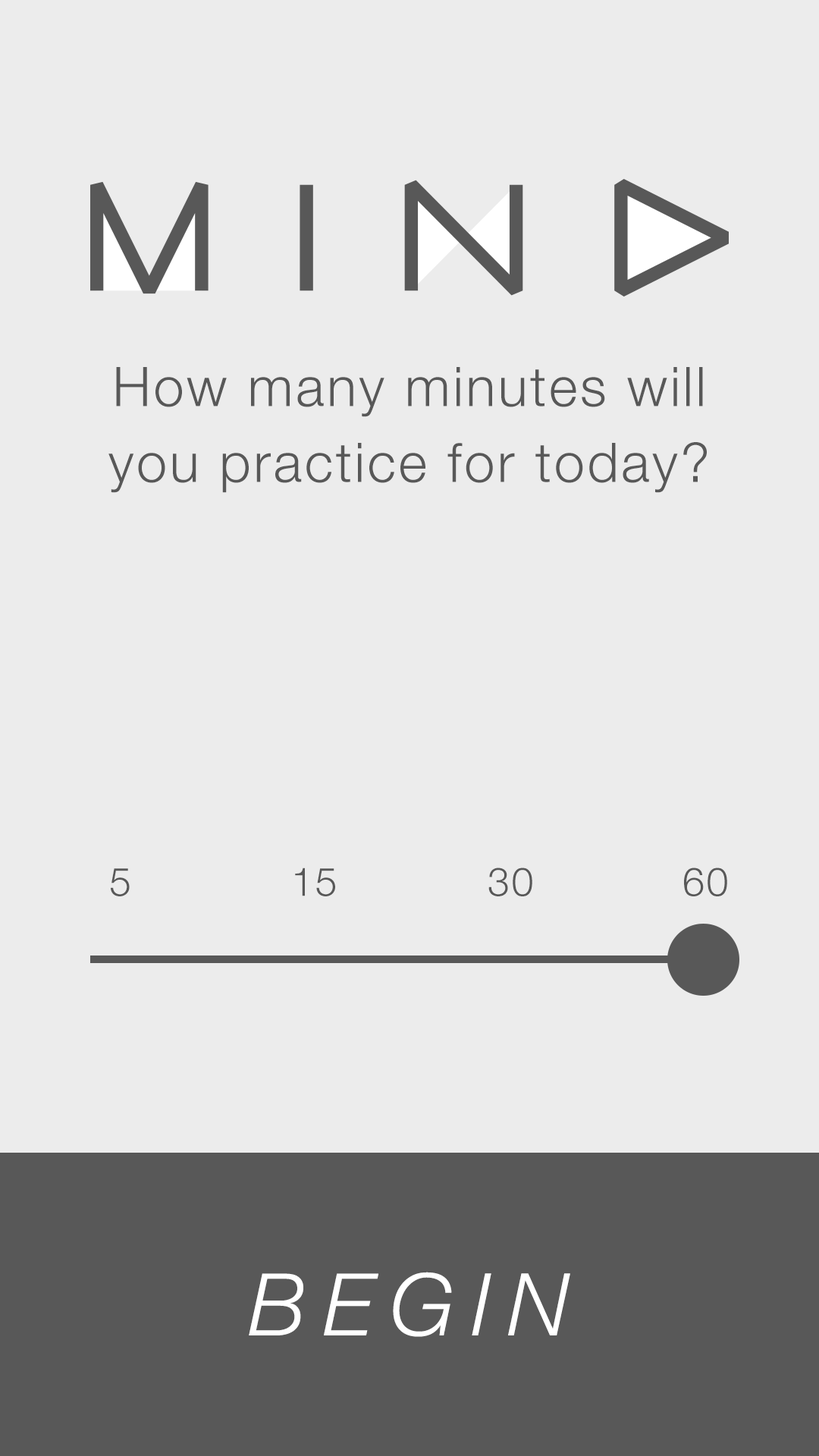
<style>
.page{position:relative;width:819px;height:1456px;background:#ececec}
.page>*{position:absolute;margin:0}
.t1{font:54.6px/75.8px "HelveticaNeue-Light";letter-spacing:0.05em;color:#585858}
.t2{font:39.4px "HelveticaNeue-Light";letter-spacing:0.05em;color:#585858}
.t3{font:86.4px "HelveticaNeue-LightItalic";letter-spacing:0.2em;color:#ffffff}
</style>
<div class="page">
<p class="t1" style="left:108px;top:367px;width:599px;height:126px;text-align:center">How many minutes will you practice for today?</p>
<p class="t2" style="left:111px;top:868px;width:19px;height:28px">5</p>
<p class="t2" style="left:295px;top:868px;width:40px;height:28px">15</p>
<p class="t2" style="left:488px;top:868px;width:44px;height:28px">30</p>
<p class="t2" style="left:684px;top:868px;width:43px;height:28px">60</p>
<p class="t3" style="left:249px;top:1272px;width:321px;height:65px">BEGIN</p>
</div>
